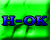
<style>
.page{position:relative;width:50px;height:40px}
.page>*{position:absolute;margin:0}
.t1{font:11.2px "MyungjoXB-HM";scale:1.53 1}
</style>
<div class="page">
<p class="t1" style="left:2px;top:16px;width:45px;height:9px">H-OK</p>
</div>
